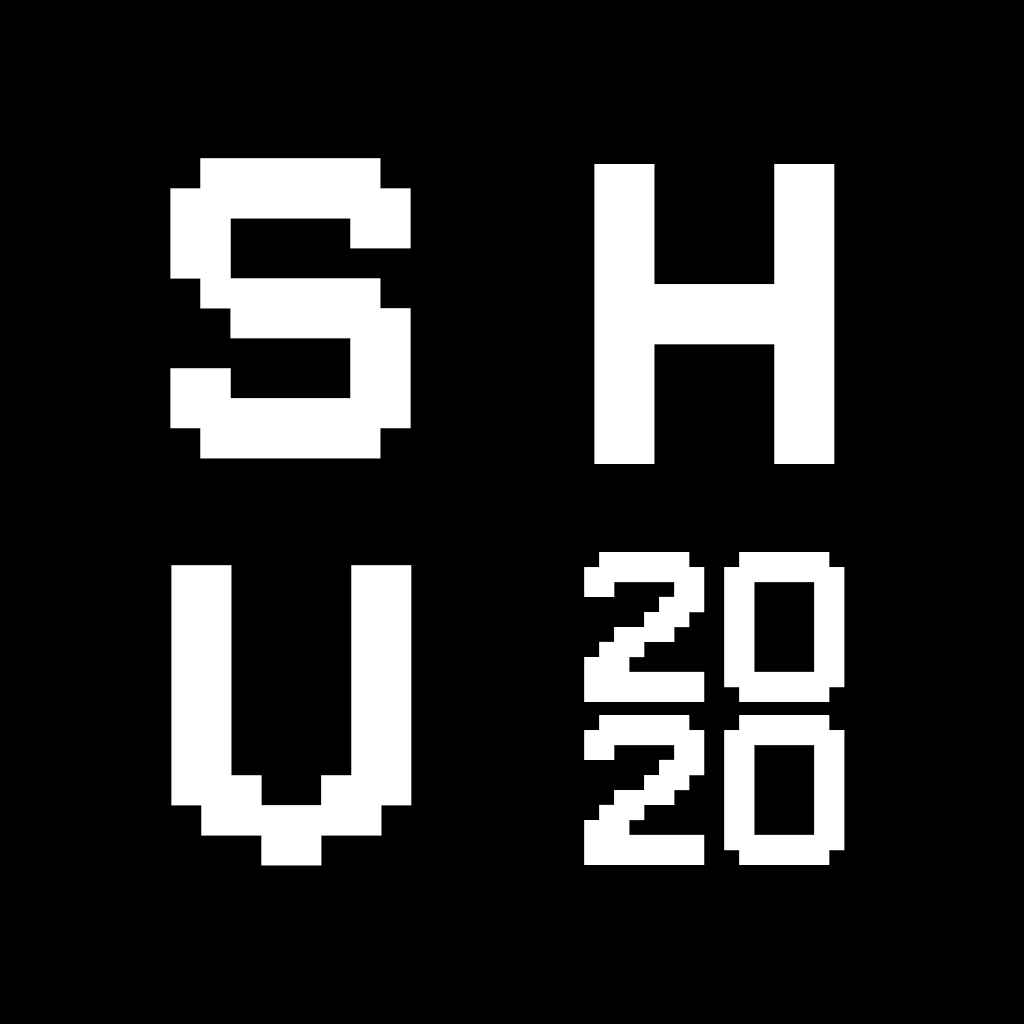
<style>
.page{position:relative;width:1024px;height:1024px;background:#000000}
.page>*{position:absolute;margin:0}
.t1{font:600px "Pixeboy";color:#ffffff}
.t2{font:300px "Pixeboy";color:#ffffff}
</style>
<div class="page">
<p class="t1" style="left:170px;top:158px;width:241px;height:301px">S</p>
<p class="t1" style="left:594px;top:164px;width:241px;height:300px">H</p>
<p class="t2" style="left:584px;top:552px;width:261px;height:150px">20</p>
<p class="t1" style="left:171px;top:565px;width:241px;height:301px">V</p>
<p class="t2" style="left:584px;top:715px;width:261px;height:150px">20</p>
</div>
